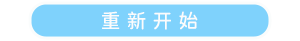
<style>
.page{position:relative;width:300px;height:41px;background:#7fd2fc}
.page>*{position:absolute;margin:0}
.t1{font:19.6px "JiangChengYuanTi-500W";letter-spacing:0.32em;color:#fcfcfc}
</style>
<div class="page">
<p class="t1" style="left:102px;top:11px;width:96px;height:19px">重新开始</p>
</div>
